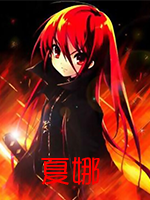
<style>
.page{position:relative;width:150px;height:200px}
.page>*{position:absolute;margin:0}
.t1{font:30px "DFPOP1-W5-WIN-BF";letter-spacing:0.04em;color:#ff0000}
</style>
<div class="page">
<p class="t1" style="left:41px;top:157px;width:59px;height:28px">夏娜</p>
</div>
